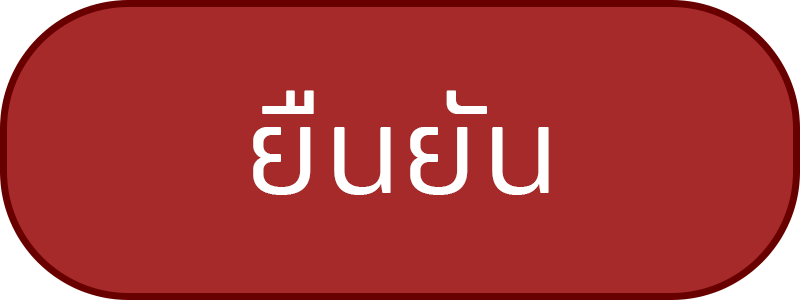
<style>
.page{position:relative;width:800px;height:300px;background:#a62a2a}
.page>*{position:absolute;margin:0}
.t1{font:100px "Petchlamoon-Regular";letter-spacing:0.04em;color:#ffffff}
</style>
<div class="page">
<p class="t1" style="left:253px;top:90px;width:296px;height:105px">ยืนยัน</p>
</div>
